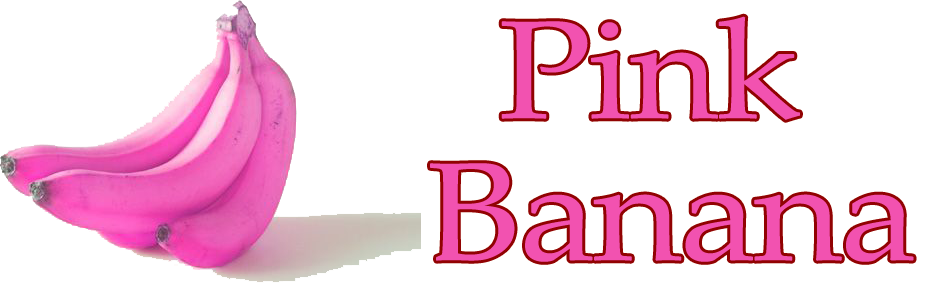
<style>
.page{position:relative;width:936px;height:283px;background:#ffffff}
.page>*{position:absolute;margin:0}
.t1{font:140px/142px "PalatinoLinotype-Roman";letter-spacing:-0.02em;color:#f252b0;scale:1.1 1}
.t2{font:140px/142px "PalatinoLinotype-Roman";color:#f252b0}
</style>
<div class="page">
<p class="t1" style="left:430px;top:16px;width:484px;height:246px"><span class="t2">  </span>Pink <br>Banana</p>
</div>
